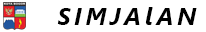
<style>
.page{position:relative;width:206px;height:32px;background:#ffffff}
.page>*{position:absolute;margin:0}
.t1{font:24px "SegoeUI-BoldItalic";letter-spacing:0.16em;color:#000000}
</style>
<div class="page">
<p class="t1" style="left:57px;top:7px;width:140px;height:18px">SIMJAlAN</p>
</div>
